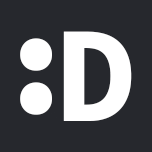
<style>
.page{position:relative;width:152px;height:152px;background:#26282d}
.page>*{position:absolute;margin:0}
.t1{font:136.6px "SourceCodePro-Bold";color:#ffffff}
</style>
<div class="page">
<p class="t1" style="left:20px;top:38px;width:32px;height:77px">:</p>
<p class="t1" style="left:63px;top:31px;width:69px;height:90px">D</p>
</div>
